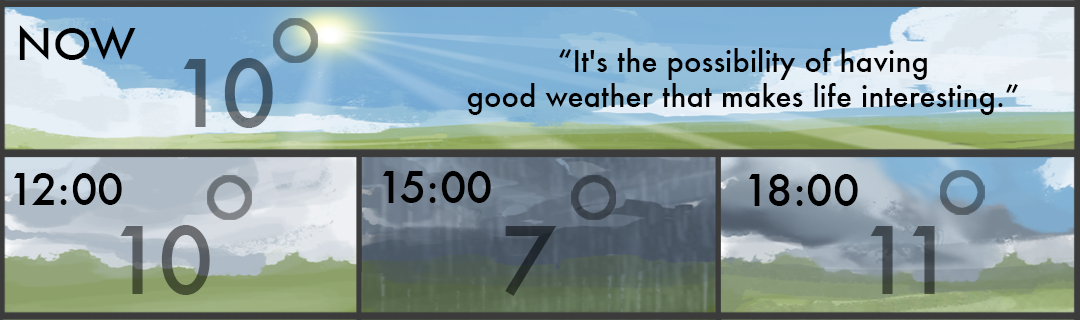
<style>
.page{position:relative;width:1080px;height:320px}
.page>*{position:absolute;margin:0}
.t1{font:43.2px "Futura-Medium";color:#000000}
.t2{font:29.2px "Futura-Medium";color:#000000}
.t3{font:90px "Futura-Medium";color:#475d6e}
.t4{font:90px "Futura-Medium"}
</style>
<div class="page">
<p class="t1" style="left:19px;top:25px;width:117px;height:35px">NOW</p>
<p class="t2" style="left:467px;top:48px;width:551px;height:67px;text-align:center">“It's the possibility of having <br>good weather that makes life interesting.”</p>
<p class="t3" style="left:183px;top:58px;width:90px;height:70px">10</p>
<p class="t1" style="left:14px;top:173px;width:108px;height:32px">12:00</p>
<p class="t1" style="left:383px;top:171px;width:108px;height:32px">15:00</p>
<p class="t1" style="left:749px;top:174px;width:109px;height:32px">18:00</p>
<p class="t4" style="left:120px;top:225px;width:815px;height:71px">10         7          11</p>
</div>
